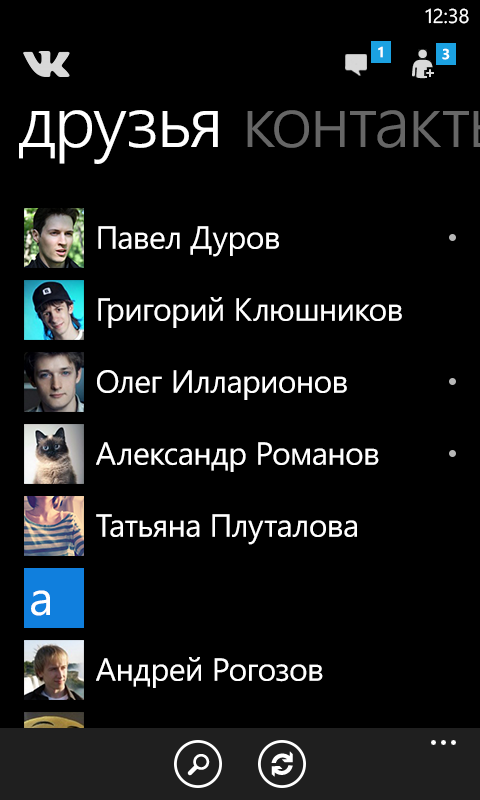
<style>
.page{position:relative;width:480px;height:800px;background:#000000}
.page>*{position:absolute;margin:0}
.t1{font:20px "SegoeWP";color:#ffffff}
.t2{font:14.7px "SegoeWP-Bold";color:#ffffff}
.t3{font:32px "SegoeWP";letter-spacing:-0.01em;color:#ffffff}
.t4{font:48px "SegoeWP";color:#ffffff}
</style>
<div class="page">
<p class="t1" style="left:425px;top:8px;width:44px;height:16px">12:38</p>
<p class="t2" style="left:378px;top:46px;width:5px;height:12px">1</p>
<p class="t2" style="left:442px;top:48px;width:8px;height:12px">3</p>
<p class="t3" style="left:98px;top:226px;width:181px;height:31px">Павел Дуров</p>
<p class="t3" style="left:98px;top:297px;width:304px;height:31px">Григорий Клюшников</p>
<p class="t3" style="left:97px;top:370px;width:250px;height:30px">Олег Илларионов</p>
<p class="t3" style="left:96px;top:442px;width:283px;height:30px">Александр Романов</p>
<p class="t3" style="left:96px;top:514px;width:261px;height:31px">Татьяна Плуталова</p>
<p class="t4" style="left:31px;top:590px;width:19px;height:26px">а</p>
<p class="t3" style="left:96px;top:657px;width:227px;height:31px">Андрей Рогозов</p>
<p class="t3" style="left:96px;top:729px;width:254px;height:25px">Алексей Степанов</p>
</div>
